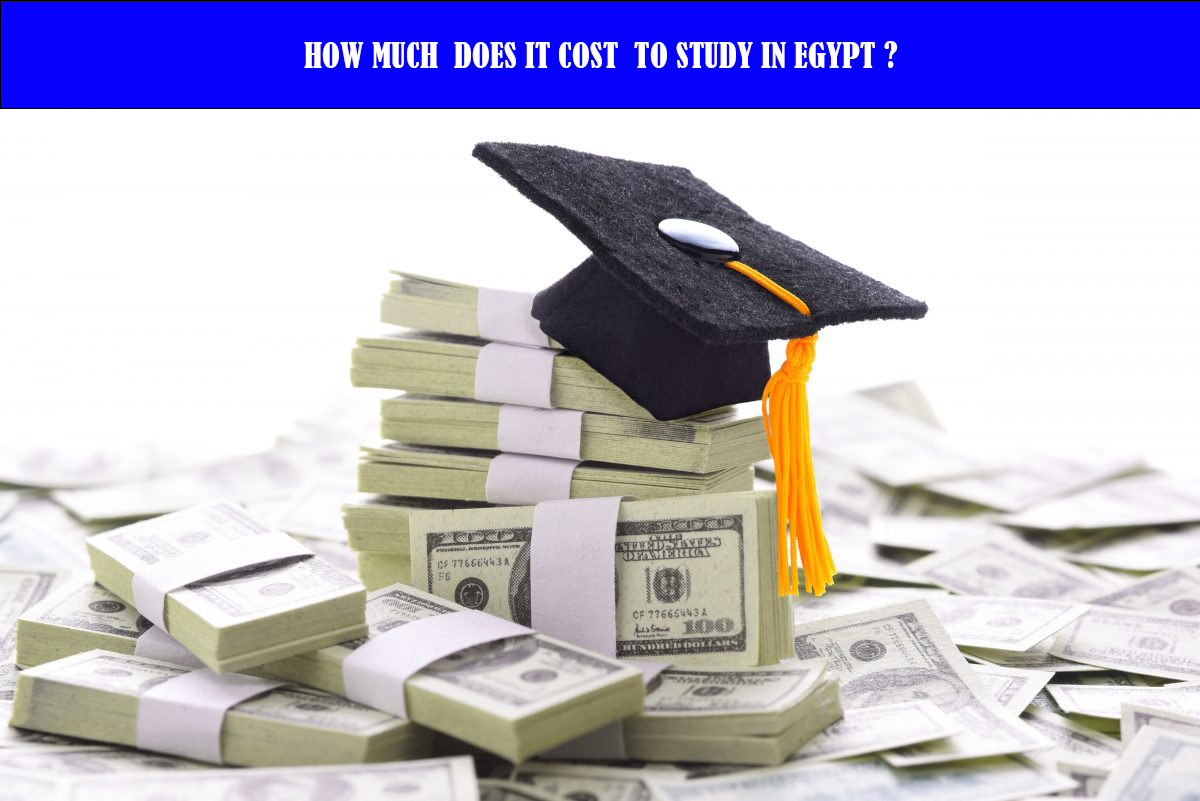
<style>
.page{position:relative;width:1200px;height:801px;background:#ffffff}
.page>*{position:absolute;margin:0}
.t1{font:33.3px "BernardMT-Condensed";color:#ffffff}
</style>
<div class="page">
<p class="t1" style="left:304px;top:41px;width:594px;height:27px">HOW MUCH  DOES IT COST  TO STUDY IN EGYPT ?</p>
</div>
